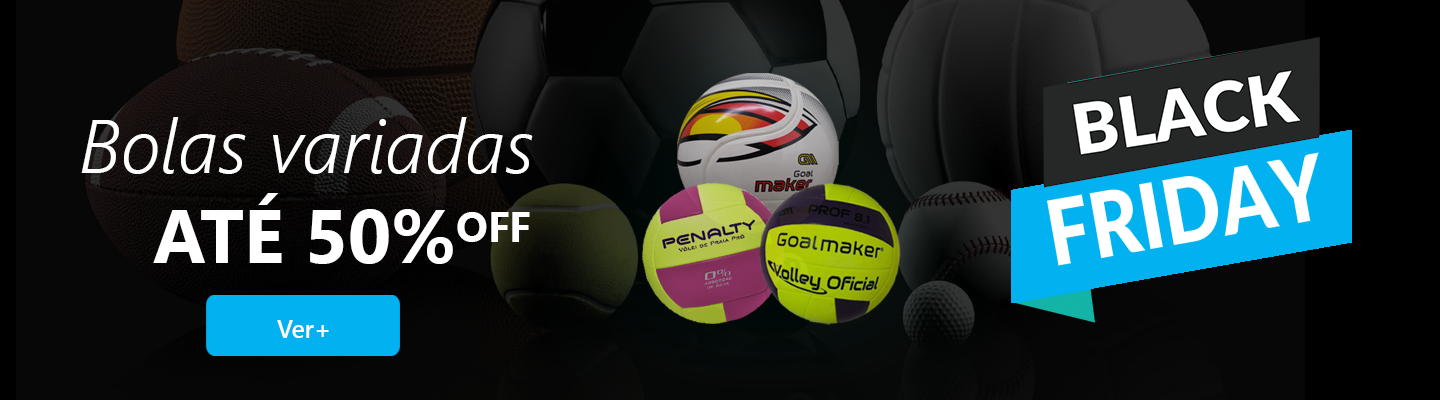
<style>
.page{position:relative;width:1440px;height:400px}
.page>*{position:absolute;margin:0}
.t1{font:75px "SegoeUI-SemilightItalic";color:#ffffff}
.t2{font:75px "SegoeUI-Bold";color:#ffffff}
.t3{font:41.7px "SegoeUI-Bold";color:#ffffff}
.t4{font:25px "SegoeUI-Semibold";color:#ffffff}
</style>
<div class="page">
<p class="t1" style="left:81px;top:117px;width:452px;height:57px">Bolas variadas</p>
<p class="t2" style="left:153px;top:193px;width:300px;height:71px">ATÉ 50%</p>
<p class="t3" style="left:457px;top:212px;width:73px;height:30px">OFF</p>
<p class="t4" style="left:277px;top:320px;width:52px;height:18px">Ver+</p>
</div>
